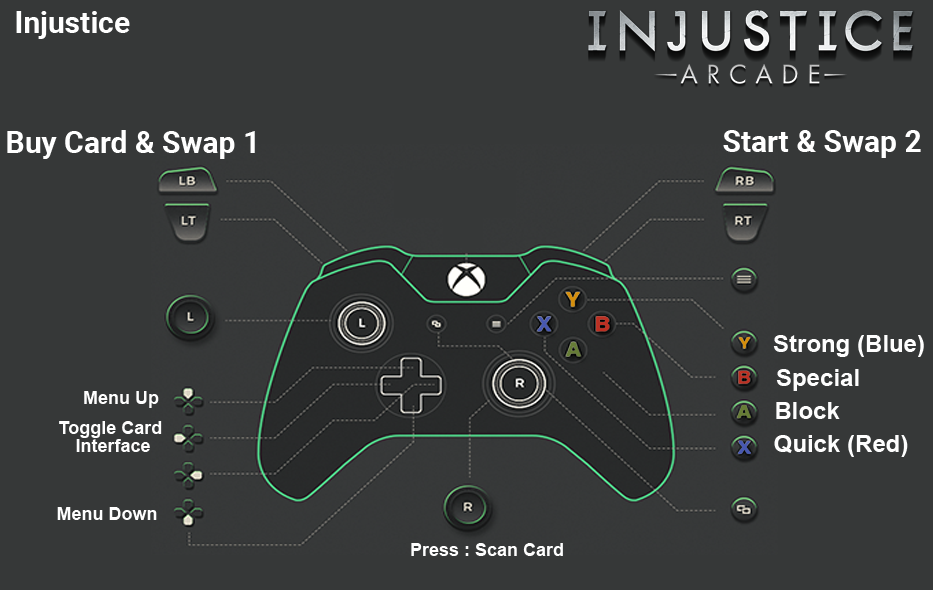
<style>
.page{position:relative;width:933px;height:590px;background:#363838}
.page>*{position:absolute;margin:0}
.t1{font:30px "Roboto-Bold";color:#ffffff}
.t2{font:24px "Arial-BoldMT";color:#fefefe}
.t3{font:18px "Arial-BoldMT";color:#fefefe}
.t4{font:18px/18px "Arial-BoldMT";color:#fefefe}
</style>
<div class="page">
<p class="t1" style="left:16px;top:11px;width:114px;height:28px">Injustice</p>
<p class="t1" style="left:7px;top:130px;width:248px;height:29px">Buy Card &amp; Swap 1</p>
<p class="t1" style="left:723px;top:130px;width:198px;height:28px">Start &amp; Swap 2</p>
<p class="t2" style="left:773px;top:335px;width:151px;height:22px">Strong (Blue)</p>
<p class="t2" style="left:776px;top:369px;width:83px;height:22px">Special</p>
<p class="t3" style="left:84px;top:391px;width:75px;height:17px">Menu Up</p>
<p class="t2" style="left:776px;top:402px;width:64px;height:17px">Block</p>
<p class="t4" style="left:59px;top:421px;width:103px;height:31px;text-align:center">Toggle Card <br>Interface</p>
<p class="t2" style="left:774px;top:435px;width:134px;height:22px">Quick (Red)</p>
<p class="t3" style="left:57px;top:507px;width:100px;height:13px">Menu Down</p>
<p class="t3" style="left:411px;top:543px;width:152px;height:13px">Press : Scan Card</p>
</div>
